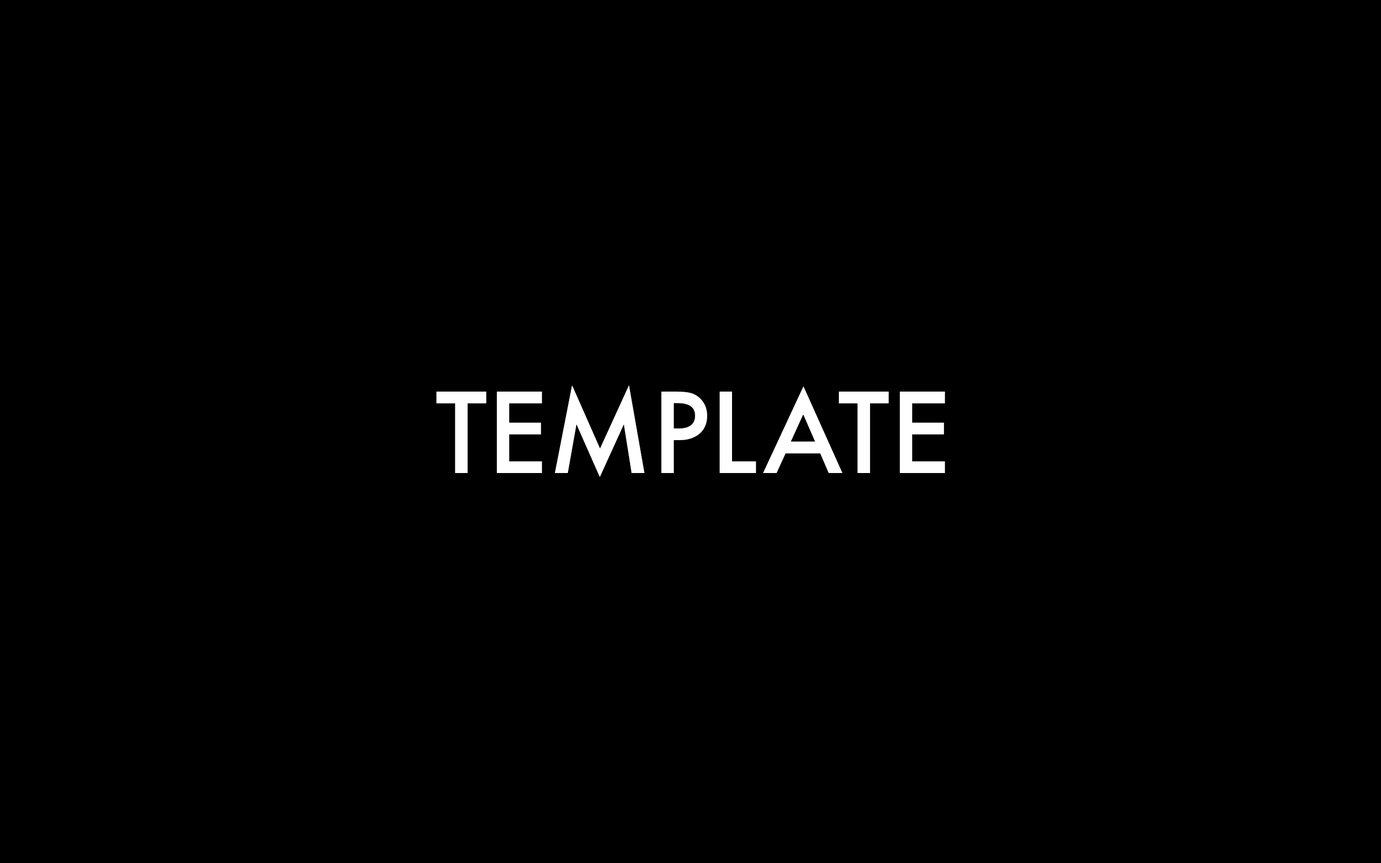
<style>
.page{position:relative;width:1381px;height:863px;background:#000000}
.page>*{position:absolute;margin:0}
.t1{font:107.9px "Futura-Medium";color:#ffffff}
</style>
<div class="page">
<p class="t1" style="left:437px;top:385px;width:508px;height:92px">TEMPLATE</p>
</div>
